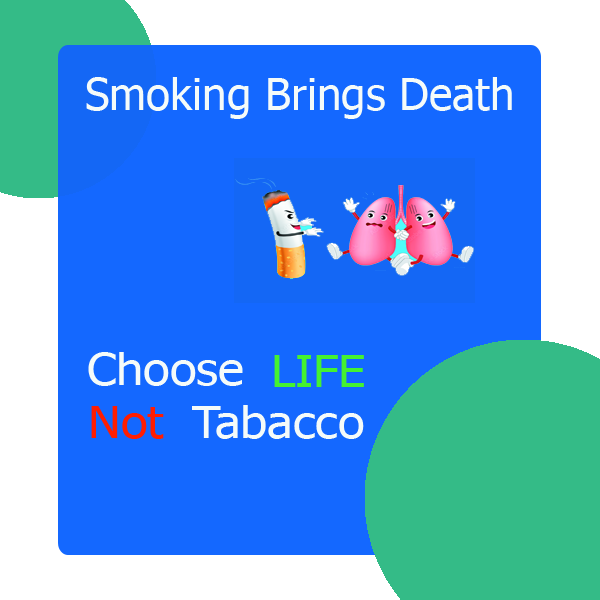
<style>
.page{position:relative;width:600px;height:600px;background:#1468ff}
.page>*{position:absolute;margin:0}
.t1{font:44px "Tahoma";color:#f5fbf9}
.t2{font:44px "Tahoma";color:#f5fbf9;scale:1.11 1}
.t3{font:44px "Tahoma";color:#44f22f;scale:1.11 1}
.t4{font:44px "Tahoma";color:#ff1d02;scale:1.11 1}
</style>
<div class="page">
<p class="t1" style="left:86px;top:77px;width:426px;height:42px">Smoking Brings Death</p>
<p class="t2" style="left:88px;top:352px;width:155px;height:34px">Choose</p>
<p class="t3" style="left:274px;top:355px;width:90px;height:32px">LIFE</p>
<p class="t4" style="left:91px;top:406px;width:73px;height:33px">Not</p>
<p class="t2" style="left:192px;top:405px;width:172px;height:34px">Tabacco</p>
</div>
